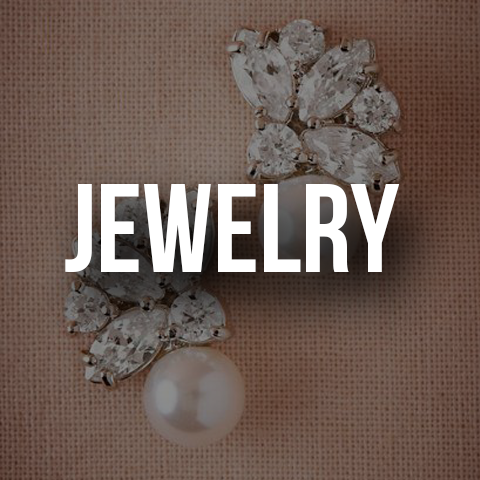
<style>
.page{position:relative;width:480px;height:480px}
.page>*{position:absolute;margin:0}
.t1{font:125px "BebasNeue";color:#ffffff}
</style>
<div class="page">
<p class="t1" style="left:65px;top:184px;width:335px;height:88px">jewelry</p>
</div>
